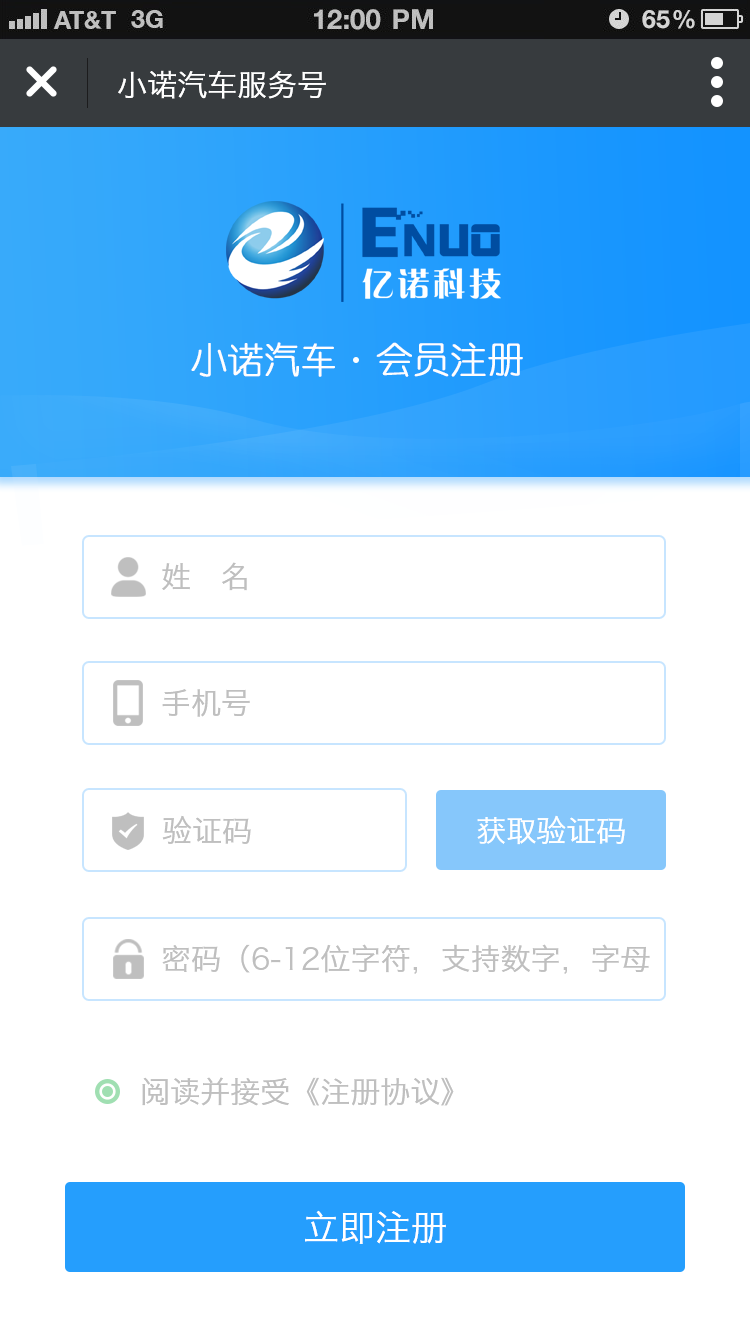
<style>
.page{position:relative;width:750px;height:1334px;background:#ffffff}
.page>*{position:absolute;margin:0}
.t1{font:30px "HiraginoSansGB-W3";color:#ffffff}
.t2{font:36px "YouYuan";color:#fefefe;font-weight:bold}
.t3{font:30px "HiraginoSansGB-W3";color:#bfbfbf}
.t4{font:36px "HiraginoSansGB-W3";color:#ffffff}
</style>
<div class="page">
<p class="t1" style="left:118px;top:70px;width:208px;height:29px">小诺汽车服务号</p>
<p class="t2" style="left:191px;top:342px;width:332px;height:35px">小诺汽车  会员注册</p>
<p class="t3" style="left:162px;top:562px;width:85px;height:29px">姓   名</p>
<p class="t3" style="left:162px;top:689px;width:88px;height:28px">手机号</p>
<p class="t3" style="left:162px;top:815px;width:89px;height:29px">验证码</p>
<p class="t1" style="left:477px;top:815px;width:148px;height:30px">获取验证码</p>
<p class="t3" style="left:162px;top:944px;width:488px;height:30px">密码（6-12位字符，支持数字，字母</p>
<p class="t3" style="left:142px;top:1077px;width:312px;height:29px">阅读并接受《注册协议》</p>
<p class="t4" style="left:305px;top:1210px;width:141px;height:34px">立即注册</p>
</div>
